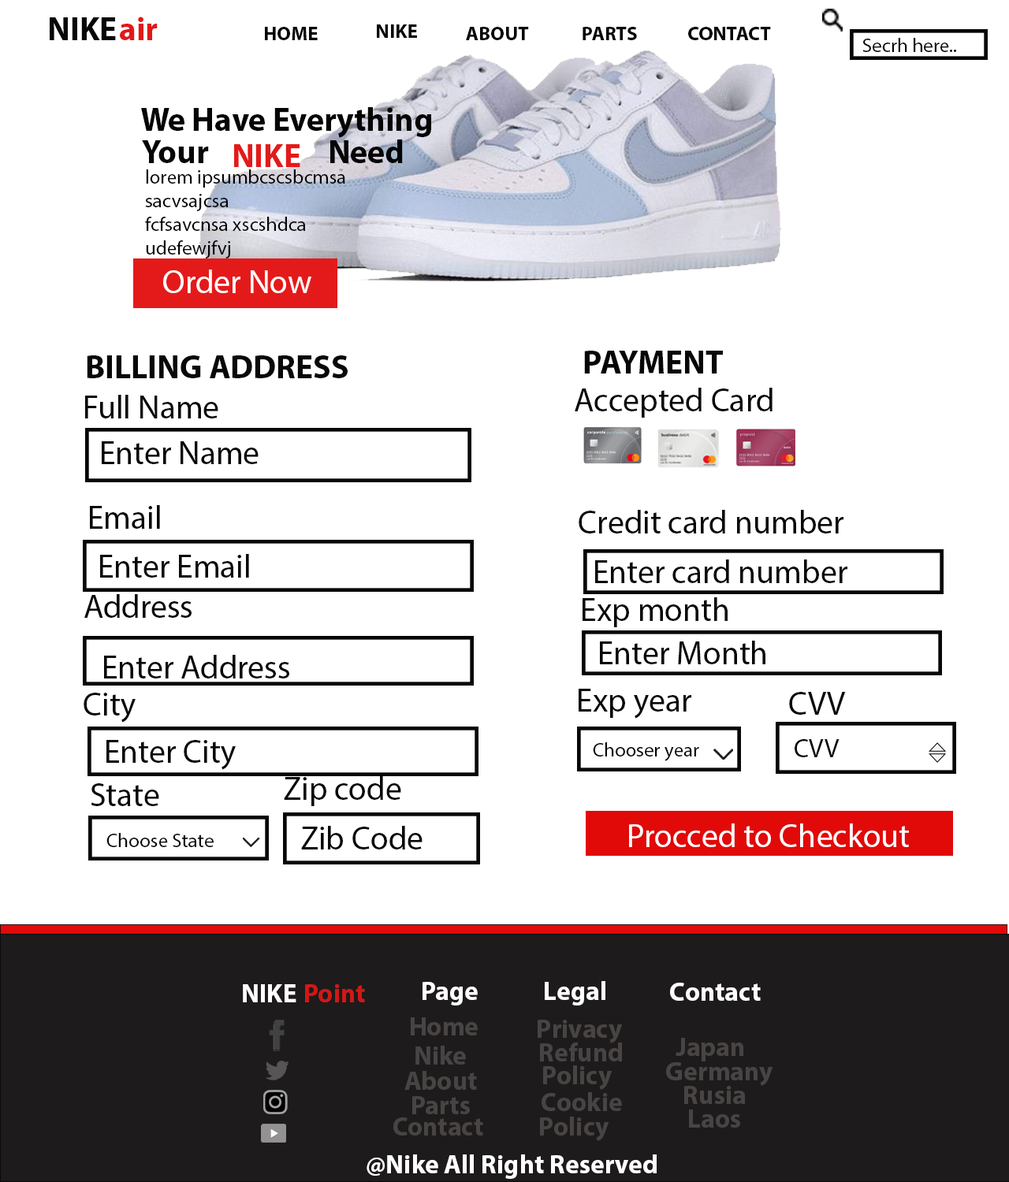
<style>
.page{position:relative;width:1009px;height:1182px;background:#ffffff}
.page>*{position:absolute;margin:0}
.t1{font:32.8px "MyriadPro-Bold";color:#070707}
.t2{font:32.8px "MyriadPro-Bold";color:#e01919}
.t3{font:19.7px "MyriadPro-Bold";color:#070606}
.t4{font:19.7px "MyriadPro-Regular";color:#070606}
.t5{font:32.8px "MyriadPro-Bold";color:#050505}
.t6{font:32.8px "MyriadPro-Bold";color:#e41a1a}
.t7{font:19.7px "MyriadPro-Regular";color:#050505}
.t8{font:32.8px "MyriadPro-Regular";color:#ffffff}
.t9{font:32.8px "MyriadPro-Bold";color:#090808}
.t10{font:32.8px "MyriadPro-Regular";color:#070707}
.t11{font:32.8px "MyriadPro-Regular";color:#090808}
.t12{font:32.8px "MyriadPro-Regular";color:#050505}
.t13{font:32.8px "MyriadPro-Regular";color:#0a0808}
.t14{font:26.3px "MyriadPro-Regular";color:#090808}
.t15{font:19.7px "MyriadPro-Regular";color:#090808}
.t16{font:26.3px "MyriadPro-Bold";color:#ffffff}
.t17{font:26.3px "MyriadPro-Bold";color:#d21717}
.t18{font:26.3px "MyriadPro-Bold";color:#494444}
</style>
<div class="page">
<p class="t1" style="left:50px;top:17px;width:66px;height:23px">NIKE</p>
<p class="t2" style="left:120px;top:17px;width:38px;height:23px">air</p>
<p class="t3" style="left:265px;top:27px;width:53px;height:13px">HOME</p>
<p class="t3" style="left:377px;top:24px;width:40px;height:14px">NIKE</p>
<p class="t3" style="left:466px;top:27px;width:63px;height:13px">ABOUT</p>
<p class="t3" style="left:582px;top:27px;width:55px;height:13px">PARTS</p>
<p class="t3" style="left:688px;top:27px;width:83px;height:13px">CONTACT</p>
<p class="t4" style="left:862px;top:38px;width:94px;height:14px">Secrh here..</p>
<p class="t5" style="left:141px;top:107px;width:291px;height:31px">We Have Everything</p>
<p class="t5" style="left:142px;top:140px;width:67px;height:23px">Your</p>
<p class="t6" style="left:234px;top:144px;width:66px;height:23px">NIKE</p>
<p class="t5" style="left:330px;top:139px;width:73px;height:24px">Need</p>
<p class="t7" style="left:145px;top:169px;width:200px;height:89px">lorem ipsumbcscsbcmsa <br>sacvsajcsa<br>fcfsavcnsa xscshdca<br>udefewjfvj</p>
<p class="t8" style="left:163px;top:270px;width:148px;height:23px">Order Now</p>
<p class="t1" style="left:584px;top:351px;width:139px;height:23px">PAYMENT</p>
<p class="t9" style="left:87px;top:355px;width:261px;height:23px">BILLING ADDRESS</p>
<p class="t10" style="left:575px;top:388px;width:197px;height:30px">Accepted Card</p>
<p class="t11" style="left:85px;top:395px;width:133px;height:23px">Full Name</p>
<p class="t12" style="left:102px;top:441px;width:156px;height:23px">Enter Name</p>
<p class="t11" style="left:90px;top:505px;width:70px;height:24px">Email</p>
<p class="t10" style="left:578px;top:510px;width:265px;height:24px">Credit card number</p>
<p class="t13" style="left:100px;top:554px;width:149px;height:24px">Enter Email</p>
<p class="t11" style="left:595px;top:560px;width:252px;height:23px">Enter card number</p>
<p class="t11" style="left:84px;top:594px;width:108px;height:24px">Address</p>
<p class="t10" style="left:582px;top:597px;width:145px;height:30px">Exp month</p>
<p class="t12" style="left:600px;top:641px;width:165px;height:23px">Enter Month</p>
<p class="t11" style="left:104px;top:655px;width:185px;height:24px">Enter Address</p>
<p class="t10" style="left:578px;top:689px;width:113px;height:30px">Exp year</p>
<p class="t11" style="left:84px;top:693px;width:52px;height:30px">City</p>
<p class="t10" style="left:789px;top:692px;width:57px;height:23px">CVV</p>
<p class="t11" style="left:106px;top:740px;width:130px;height:30px">Enter City</p>
<p class="t7" style="left:593px;top:742px;width:106px;height:19px">Chooser year</p>
<p class="t14" style="left:794px;top:739px;width:45px;height:18px">CVV</p>
<p class="t11" style="left:91px;top:783px;width:68px;height:23px">State</p>
<p class="t11" style="left:284px;top:776px;width:117px;height:30px">Zip code</p>
<p class="t15" style="left:106px;top:833px;width:108px;height:14px">Choose State</p>
<p class="t11" style="left:301px;top:826px;width:121px;height:24px">Zib Code</p>
<p class="t8" style="left:629px;top:824px;width:280px;height:23px">Procced to Checkout</p>
<p class="t16" style="left:243px;top:984px;width:53px;height:18px">NIKE</p>
<p class="t17" style="left:305px;top:984px;width:60px;height:18px">Point</p>
<p class="t16" style="left:422px;top:982px;width:56px;height:24px">Page</p>
<p class="t16" style="left:545px;top:981px;width:60px;height:25px">Legal</p>
<p class="t16" style="left:670px;top:983px;width:90px;height:18px">Contact</p>
<p class="t18" style="left:411px;top:1017px;width:67px;height:19px">Home</p>
<p class="t18" style="left:537px;top:1020px;width:86px;height:23px">Privacy</p>
<p class="t18" style="left:675px;top:1038px;width:68px;height:24px">Japan</p>
<p class="t18" style="left:415px;top:1046px;width:51px;height:19px">Nike</p>
<p class="t18" style="left:540px;top:1043px;width:82px;height:19px">Refund</p>
<p class="t18" style="left:404px;top:1071px;width:73px;height:19px">About</p>
<p class="t18" style="left:543px;top:1065px;width:69px;height:25px">Policy</p>
<p class="t18" style="left:666px;top:1062px;width:107px;height:24px">Germany</p>
<p class="t18" style="left:684px;top:1086px;width:62px;height:18px">Rusia</p>
<p class="t18" style="left:412px;top:1096px;width:58px;height:18px">Parts</p>
<p class="t18" style="left:541px;top:1092px;width:81px;height:19px">Cookie</p>
<p class="t18" style="left:689px;top:1110px;width:51px;height:18px">Laos</p>
<p class="t18" style="left:393px;top:1117px;width:90px;height:19px">Contact</p>
<p class="t18" style="left:540px;top:1117px;width:69px;height:24px">Policy</p>
<p class="t16" style="left:366px;top:1155px;width:290px;height:24px">@Nike All Right Reserved</p>
</div>
